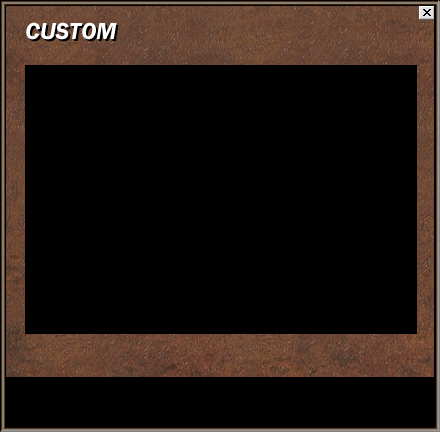
<style>
.page{position:relative;width:440px;height:432px;background:#000000}
.page>*{position:absolute;margin:0}
.t1{font:24px "FranklinGothic-DemiItalic";color:#ffffff}
</style>
<div class="page">
<p class="t1" style="left:26px;top:22px;width:91px;height:18px">CUSTOM</p>
</div>
